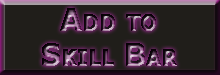
<style>
.page{position:relative;width:220px;height:75px;background:#201e1a}
.page>*{position:absolute;margin:0}
.t1{font:30px "Tahoma-Bold";font-variant:small-caps;font-weight:bold}
</style>
<div class="page">
<p class="t1" style="left:42px;top:8px;width:135px;height:58px;text-align:center">Add to<br>Skill Bar</p>
</div>
